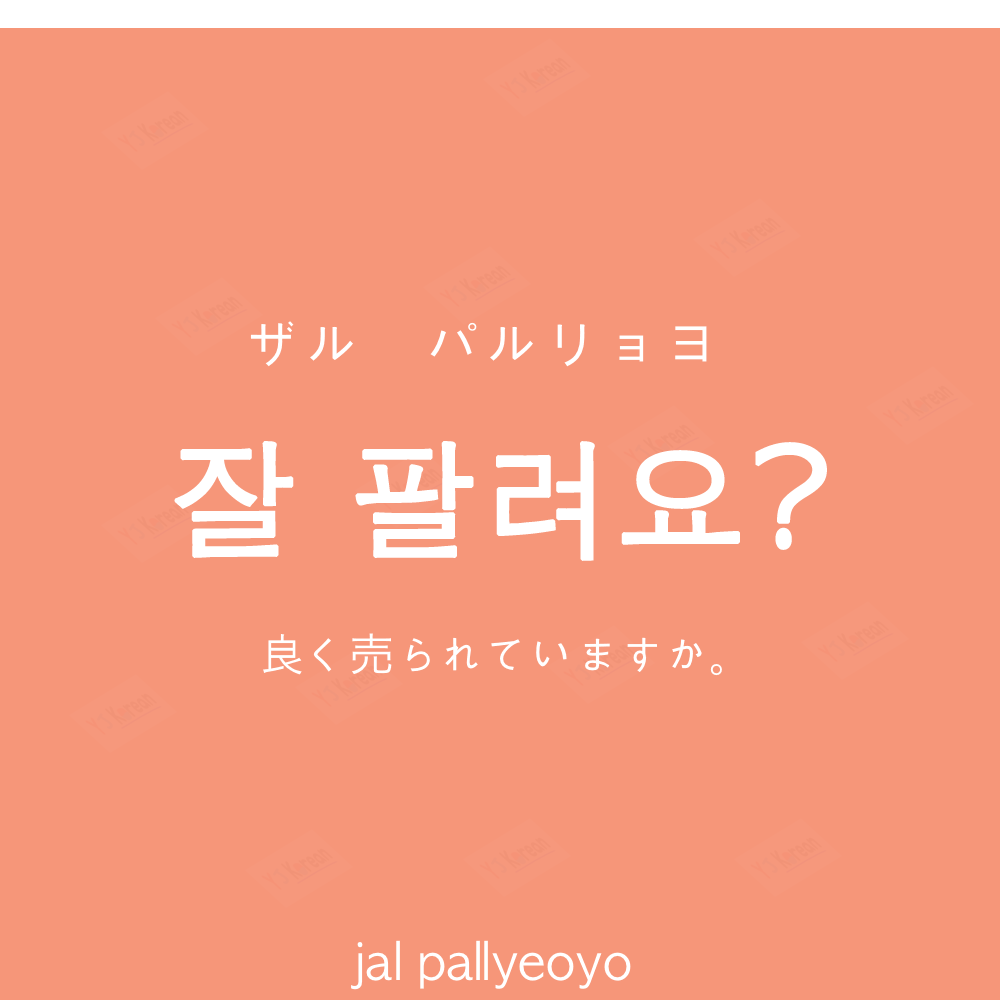
<style>
.page{position:relative;width:1000px;height:1000px;background:#f69679}
.page>*{position:absolute;margin:0}
.t1{font:60px "AppleGothic";color:#ffffff}
.t2{font:130px "AppleGothic";color:#ffffff;font-weight:bold}
.t3{font:45px "AppleGothic";color:#ffffff}
.t4{font:45px "HiraKakuProN-W3";color:#ffffff}
.t5{font:50px "AppleGothic";color:#ffffff}
</style>
<div class="page">
<p class="t1" style="left:250px;top:321px;width:457px;height:46px">ザル　パルリョヨ</p>
<p class="t2" style="left:174px;top:441px;width:653px;height:120px">잘 팔려요?</p>
<p class="t3" style="left:263px;top:633px;width:459px;height:43px">良く<span class="t4">売</span>られていますか。</p>
<p class="t5" style="left:351px;top:940px;width:280px;height:50px">jal pallyeoyo</p>
</div>
